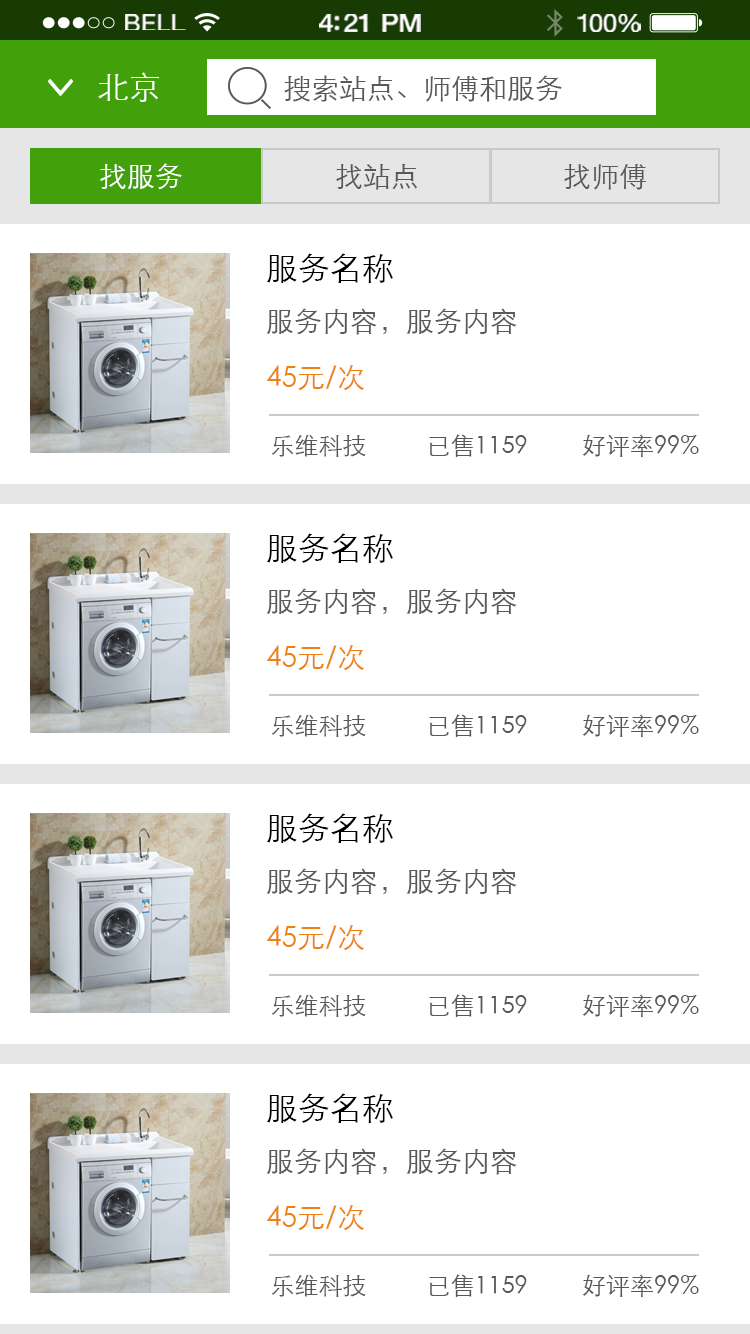
<style>
.page{position:relative;width:750px;height:1334px;background:#ffffff}
.page>*{position:absolute;margin:0}
.t1{font:23.3px "HelveticaNeue";letter-spacing:0.02em;color:#ffffff;scale:1.06 1}
.t2{font:25.3px "HelveticaNeue-Medium";letter-spacing:-0.02em;color:#ffffff;scale:1.06 1}
.t3{font:24.3px "HelveticaNeue";letter-spacing:-0.02em;color:#ffffff;scale:1.06 1}
.t4{font:32px "STXihei";color:#ffffff}
.t5{font:28px "STXihei";color:#595757}
.t6{font:28px "STXihei";color:#ffffff}
.t7{font:28px/56px "STXihei";color:#595757}
.t8{font:32px/56px "STXihei";color:#000000}
.t9{font:28px/56px "STXihei";color:#ef8013}
.t10{font:24px "STXihei";color:#595757}
</style>
<div class="page">
<p class="t1" style="left:125px;top:14px;width:61px;height:16px">BELL</p>
<p class="t2" style="left:319px;top:14px;width:102px;height:18px">4:21 PM</p>
<p class="t3" style="left:577px;top:14px;width:64px;height:18px">100%</p>
<p class="t4" style="left:98px;top:72px;width:61px;height:30px">北京</p>
<p class="t5" style="left:284px;top:75px;width:278px;height:27px">搜索站点、师傅和服务</p>
<p class="t6" style="left:100px;top:163px;width:82px;height:27px">找服务</p>
<p class="t5" style="left:336px;top:164px;width:81px;height:26px">找站点</p>
<p class="t5" style="left:564px;top:164px;width:82px;height:26px">找师傅</p>
<p class="t7" style="left:266px;top:253px;width:251px;height:138px"><span class="t8">服务名称<br></span>服务内容，服务内容<br><span class="t9">45元/次</span></p>
<p class="t10" style="left:271px;top:434px;width:428px;height:23px">乐维科技          已售1159         好评率99%</p>
<p class="t7" style="left:266px;top:533px;width:251px;height:138px"><span class="t8">服务名称<br></span>服务内容，服务内容<br><span class="t9">45元/次</span></p>
<p class="t10" style="left:271px;top:714px;width:428px;height:23px">乐维科技          已售1159         好评率99%</p>
<p class="t7" style="left:266px;top:813px;width:251px;height:138px"><span class="t8">服务名称<br></span>服务内容，服务内容<br><span class="t9">45元/次</span></p>
<p class="t10" style="left:271px;top:994px;width:428px;height:23px">乐维科技          已售1159         好评率99%</p>
<p class="t7" style="left:266px;top:1093px;width:251px;height:138px"><span class="t8">服务名称<br></span>服务内容，服务内容<br><span class="t9">45元/次</span></p>
<p class="t10" style="left:271px;top:1274px;width:428px;height:23px">乐维科技          已售1159         好评率99%</p>
</div>
